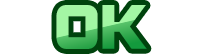
<style>
.page{position:relative;width:202px;height:54px;background:#ffffff}
.page>*{position:absolute;margin:0}
.t1{font:69.3px "DFSoGeiStd-W9";scale:0.92 1}
</style>
<div class="page">
<p class="t1" style="left:56px;top:5px;width:91px;height:44px">OK</p>
</div>
